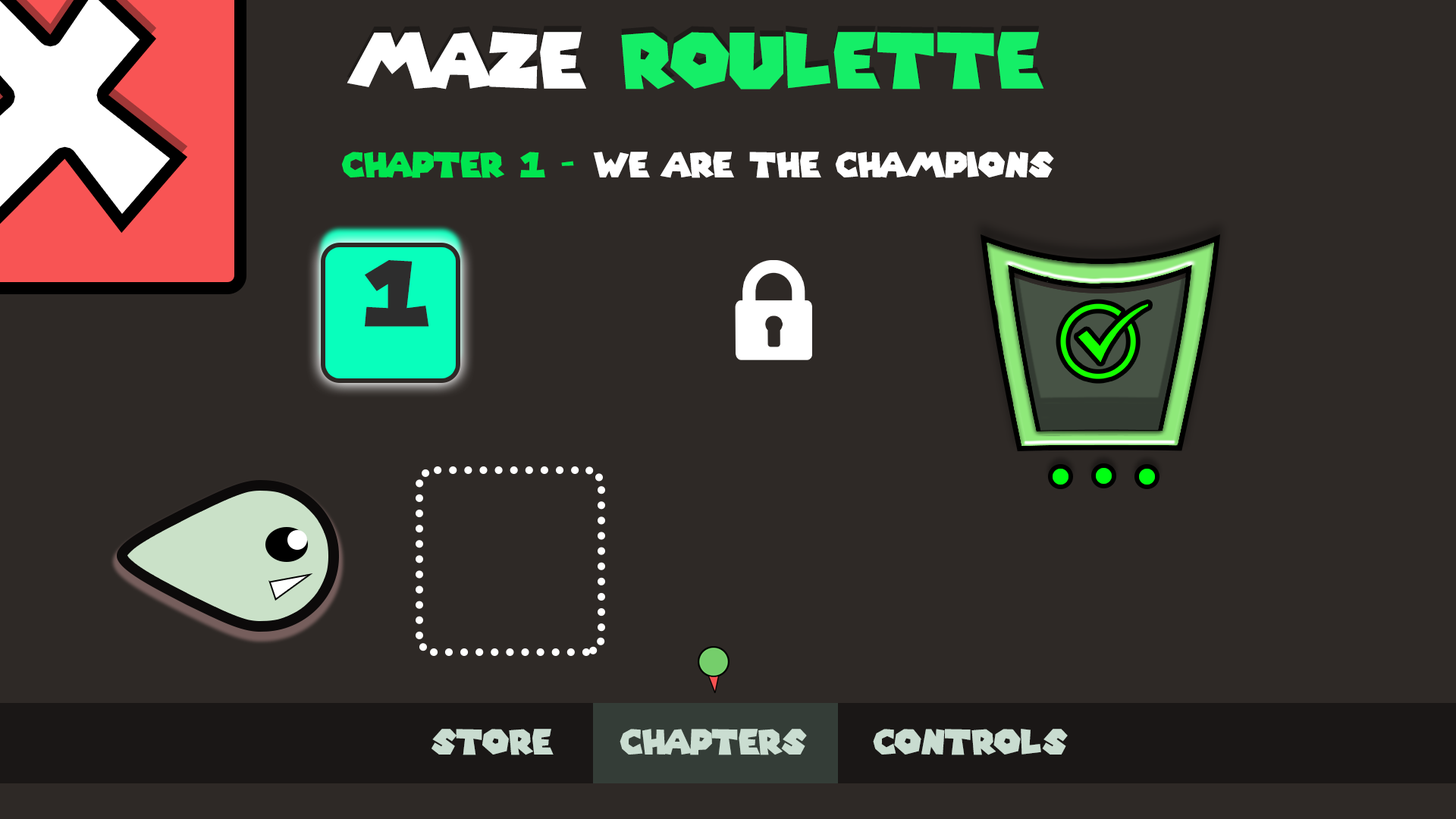
<style>
.page{position:relative;width:1456px;height:819px;background:#2e2926}
.page>*{position:absolute;margin:0}
.t1{font:75.9px "SuperMarioGalaxy";color:#15ee67}
.t2{font:75.9px "SuperMarioGalaxy";color:#ffffff}
.t3{font:34.1px "SuperMarioGalaxy";color:#ffffff}
.t4{font:34.1px "SuperMarioGalaxy";color:#00e650}
.t5{font:89.5px "SuperMarioGalaxy";color:#2d2d2d}
.t6{font:34.1px "SuperMarioGalaxy";color:#c9dcd0}
.t7{font:34.1px "SuperMarioGalaxy";color:#caddd1}
</style>
<div class="page">
<p class="t1" style="left:347px;top:32px;width:697px;height:57px"><span class="t2">MAZE </span>ROULETTE</p>
<p class="t3" style="left:341px;top:152px;width:713px;height:26px"><span class="t4">CHAPTER 1 - </span>WE ARE THE CHAMPIONS</p>
<p class="t5" style="left:365px;top:260px;width:64px;height:67px">1</p>
<p class="t6" style="left:431px;top:729px;width:123px;height:26px">STORE</p>
<p class="t7" style="left:620px;top:729px;width:187px;height:26px">CHAPTERS</p>
<p class="t6" style="left:873px;top:729px;width:195px;height:26px">CONTROLS</p>
</div>
